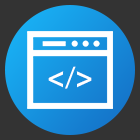
<style>
.page{position:relative;width:140px;height:140px;background:#333333}
.page>*{position:absolute;margin:0}
.t1{font:30px "MyriadPro-Bold";color:#ffffff}
.t2{font:30px "MyriadPro-Regular";color:#ffffff}
</style>
<div class="page">
<p class="t1" style="left:48px;top:66px;width:44px;height:23px">&lt;<span class="t2">/</span>&gt;</p>
</div>
